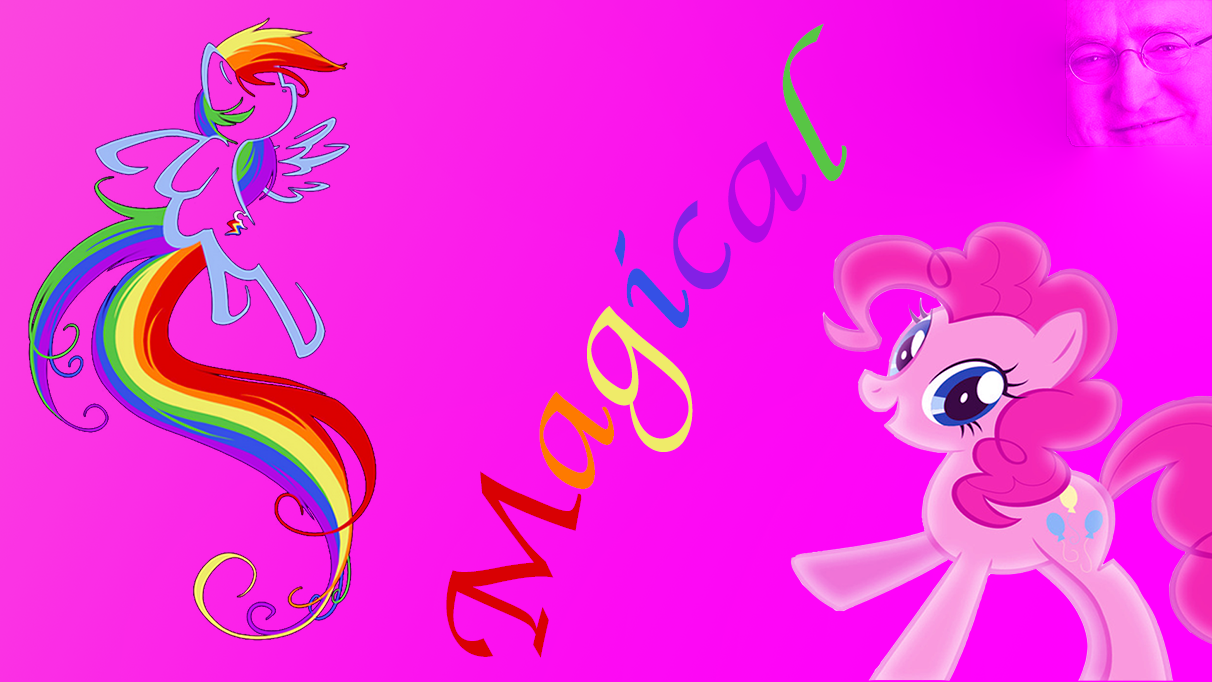
<style>
.page{position:relative;width:1212px;height:682px}
.page>*{position:absolute;margin:0}
.t1{font:157.8px "Apple-Chancery"}
</style>
<div class="page">
<p class="t1" style="left:446px;top:23px;width:401px;height:635px;rotate:-57deg">Magical</p>
</div>
